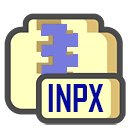
<style>
.page{position:relative;width:128px;height:128px;background:#ffffbf}
.page>*{position:absolute;margin:0}
.t1{font:36px "AgencyFB-Bold";color:#06099f}
</style>
<div class="page">
<p class="t1" style="left:48px;top:84px;width:56px;height:28px">INPX</p>
</div>
